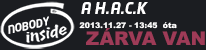
<style>
.page{position:relative;width:206px;height:50px;background:#1b1d21}
.page>*{position:absolute;margin:0}
.t1{font:15px "NeoTech-BoldItalic";color:#ffffff}
.t2{font:10.8px "NeoTech-MediumItalic";color:#ffffff}
.t3{font:7.8px "Arial-Black";color:#ffffff}
.t4{font:18.7px "Arial-Black";color:#9e3b57}
</style>
<div class="page">
<p class="t1" style="left:81px;top:2px;width:67px;height:12px">A H.A.C.K</p>
<p class="t2" style="left:8px;top:16px;width:41px;height:18px;rotate:-12deg">NOBODY</p>
<p class="t3" style="left:79px;top:22px;width:98px;height:7px">2013.11.27 - 13:45  óta</p>
<p class="t4" style="left:86px;top:28px;width:119px;height:17px">ZÁRVA VAN</p>
</div>
